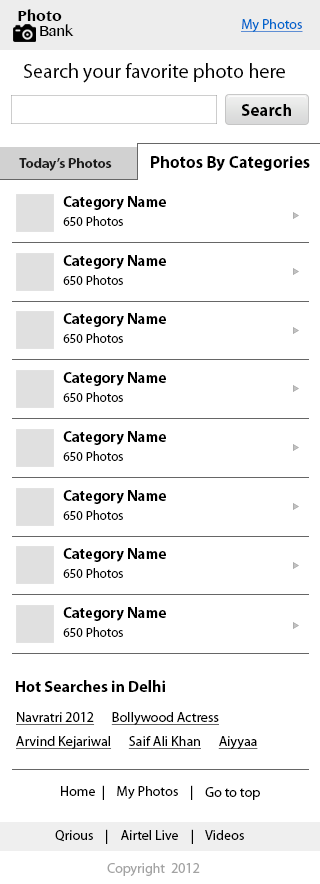
<style>
.page{position:relative;width:320px;height:884px;background:#ffffff}
.page>*{position:absolute;margin:0}
.t1{font:14.7px/15.5px "TamilMN-Bold";color:#000000}
.t2{font:14.7px/15.5px "TamilMN";color:#000000}
.t3{font:14px "MyriadPro-Regular";color:#0066cc;text-decoration:underline}
.t4{font:20px "MyriadPro-Regular";color:#000000}
.t5{font:17px "MyriadPro-Bold";color:#000000}
.t6{font:14px "MyriadPro-Bold";color:#1f1f1f}
.t7{font:15px "MyriadPro-Bold";color:#000000}
.t8{font:13px "MyriadPro-Regular";color:#000000}
.t9{font:16px "MyriadPro-Bold";color:#000000}
.t10{font:14px/24px "MyriadPro-Regular";color:#000000;text-decoration:underline}
.t11{font:14px "MyriadPro-Regular";color:#000000}
.t12{font:14px "MyriadPro-Regular";color:#a3a3a3}
</style>
<div class="page">
<p class="t1" style="left:18px;top:9px;width:56px;height:27px">Photo<br><span class="t2">     Bank</span></p>
<p class="t3" style="left:241px;top:19px;width:62px;height:13px">My Photos</p>
<p class="t4" style="left:24px;top:63px;width:261px;height:20px">Search your favorite photo here</p>
<p class="t5" style="left:241px;top:104px;width:50px;height:12px">Search</p>
<p class="t6" style="left:19px;top:158px;width:93px;height:13px">Today’s Photos</p>
<p class="t5" style="left:151px;top:156px;width:159px;height:15px">Photos By Categories</p>
<p class="t7" style="left:63px;top:196px;width:103px;height:14px">Category Name</p>
<p class="t8" style="left:63px;top:216px;width:60px;height:10px">650 Photos</p>
<p class="t7" style="left:63px;top:255px;width:103px;height:14px">Category Name</p>
<p class="t8" style="left:63px;top:275px;width:60px;height:10px">650 Photos</p>
<p class="t7" style="left:63px;top:313px;width:103px;height:14px">Category Name</p>
<p class="t8" style="left:63px;top:333px;width:60px;height:10px">650 Photos</p>
<p class="t7" style="left:63px;top:372px;width:103px;height:14px">Category Name</p>
<p class="t8" style="left:63px;top:392px;width:60px;height:10px">650 Photos</p>
<p class="t7" style="left:63px;top:431px;width:103px;height:14px">Category Name</p>
<p class="t8" style="left:63px;top:451px;width:60px;height:10px">650 Photos</p>
<p class="t7" style="left:63px;top:490px;width:103px;height:14px">Category Name</p>
<p class="t8" style="left:63px;top:510px;width:60px;height:10px">650 Photos</p>
<p class="t7" style="left:63px;top:548px;width:103px;height:14px">Category Name</p>
<p class="t8" style="left:63px;top:568px;width:60px;height:10px">650 Photos</p>
<p class="t7" style="left:63px;top:607px;width:103px;height:14px">Category Name</p>
<p class="t8" style="left:63px;top:627px;width:60px;height:10px">650 Photos</p>
<p class="t9" style="left:16px;top:680px;width:149px;height:12px">Hot Searches in Delhi</p>
<p class="t10" style="left:16px;top:712px;width:242px;height:37px">Navratri 2012      Bollywood Actress     <br>Arvind Kejariwal      Saif Ali Khan      Aiyyaa</p>
<p class="t11" style="left:61px;top:785px;width:132px;height:15px">Home  |    My Photos    |</p>
<p class="t11" style="left:205px;top:787px;width:55px;height:13px">Go to top</p>
<p class="t11" style="left:55px;top:829px;width:189px;height:15px">Qrious    |    Airtel Live    |    Videos</p>
<p class="t12" style="left:107px;top:863px;width:93px;height:13px">Copyright  2012</p>
</div>
